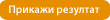
<style>
.page{position:relative;width:110px;height:20px;background:#e68d00}
.page>*{position:absolute;margin:0}
.t1{font:11px "MyriadPro-Semibold";color:#ffffff}
</style>
<div class="page">
<p class="t1" style="left:9px;top:5px;width:91px;height:11px">Прикажи резултат</p>
</div>
